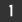
<style>
.page{position:relative;width:22px;height:22px;background:#333333}
.page>*{position:absolute;margin:0}
.t1{font:14px "Norwester-Regular";color:#ffffff;font-weight:bold;scale:0.77 1}
</style>
<div class="page">
<p class="t1" style="left:9px;top:4px;width:4px;height:13px">1</p>
</div>
